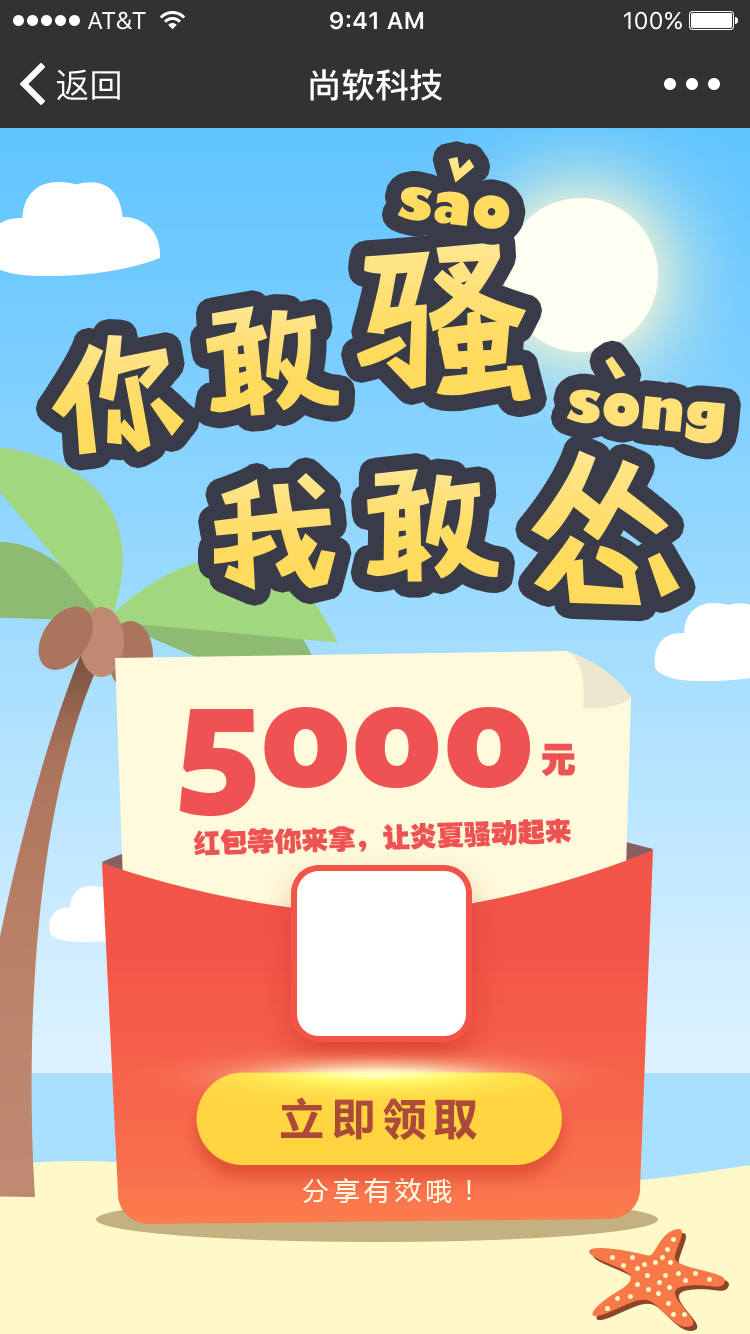
<style>
.page{position:relative;width:750px;height:1334px}
.page>*{position:absolute;margin:0}
.t1{font:34px "PingFang-SC-Medium";color:#ffffff}
.t2{font:34px "PingFang-SC-Bold";color:#ffffff}
.t3{font:159.9px "FreightSansBlack";color:#ef5252}
.t4{font:35.1px "FZCCHJW--GB1-0";color:#ef5252}
.t5{font:27.1px "FZCCHJW--GB1-0";color:#ef5252}
.t6{font:26px "MicrosoftYaHei";letter-spacing:0.18em;color:#fefce2}
</style>
<div class="page">
<p class="t1" style="left:57px;top:69px;width:63px;height:32px">返回</p>
<p class="t2" style="left:310px;top:68px;width:132px;height:33px">尚软科技</p>
<p class="t3" style="left:179px;top:707px;width:352px;height:109px">5000</p>
<p class="t4" style="left:541px;top:743px;width:34px;height:33px">元</p>
<p class="t5" style="left:193px;top:818px;width:378px;height:38px;rotate:-2deg">红包等你来拿，让炎夏骚动起来</p>
<p class="t6" style="left:302px;top:1178px;width:169px;height:25px">分享有效哦！</p>
</div>
